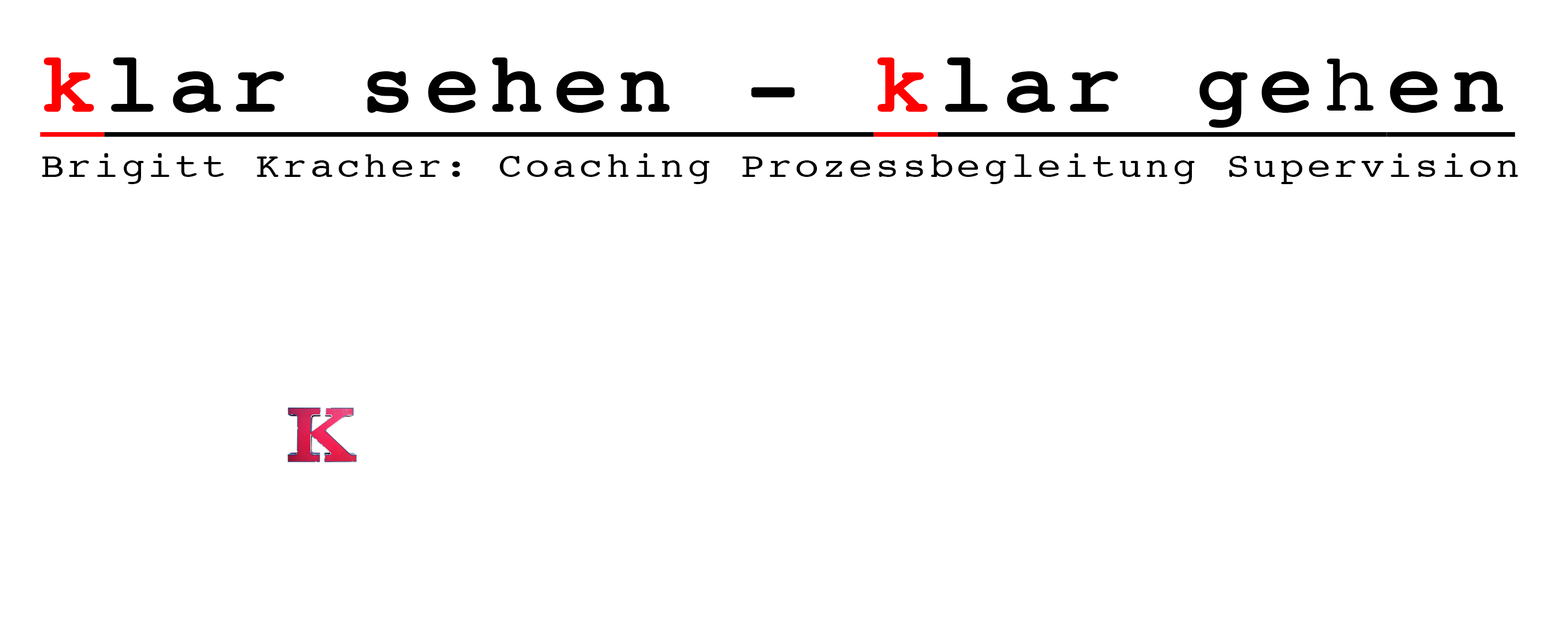
<style>
.page{position:relative;width:1568px;height:627px;background:#ffffff}
.page>*{position:absolute;margin:0}
.t1{font:35.7px/66.4px "Courier";letter-spacing:0.075em;color:#000000;scale:1.12 1}
.t2{font:81.6px "Courier";letter-spacing:0.075em;color:#ff0000;font-weight:bold;text-decoration:underline;scale:1.12 1}
.t3{font:81.6px "Courier";letter-spacing:0.075em;color:#000000;font-weight:bold;text-decoration:underline;scale:1.12 1}
</style>
<div class="page">
<p class="t1" style="left:40px;top:57px;width:1478px;height:127px"><span class="t2">k</span><span class="t3">lar sehen - </span><span class="t2">k</span><span class="t3">lar gehen<br></span>Brigitt Kracher: Coaching Prozessbegleitung Supervision</p>
</div>
